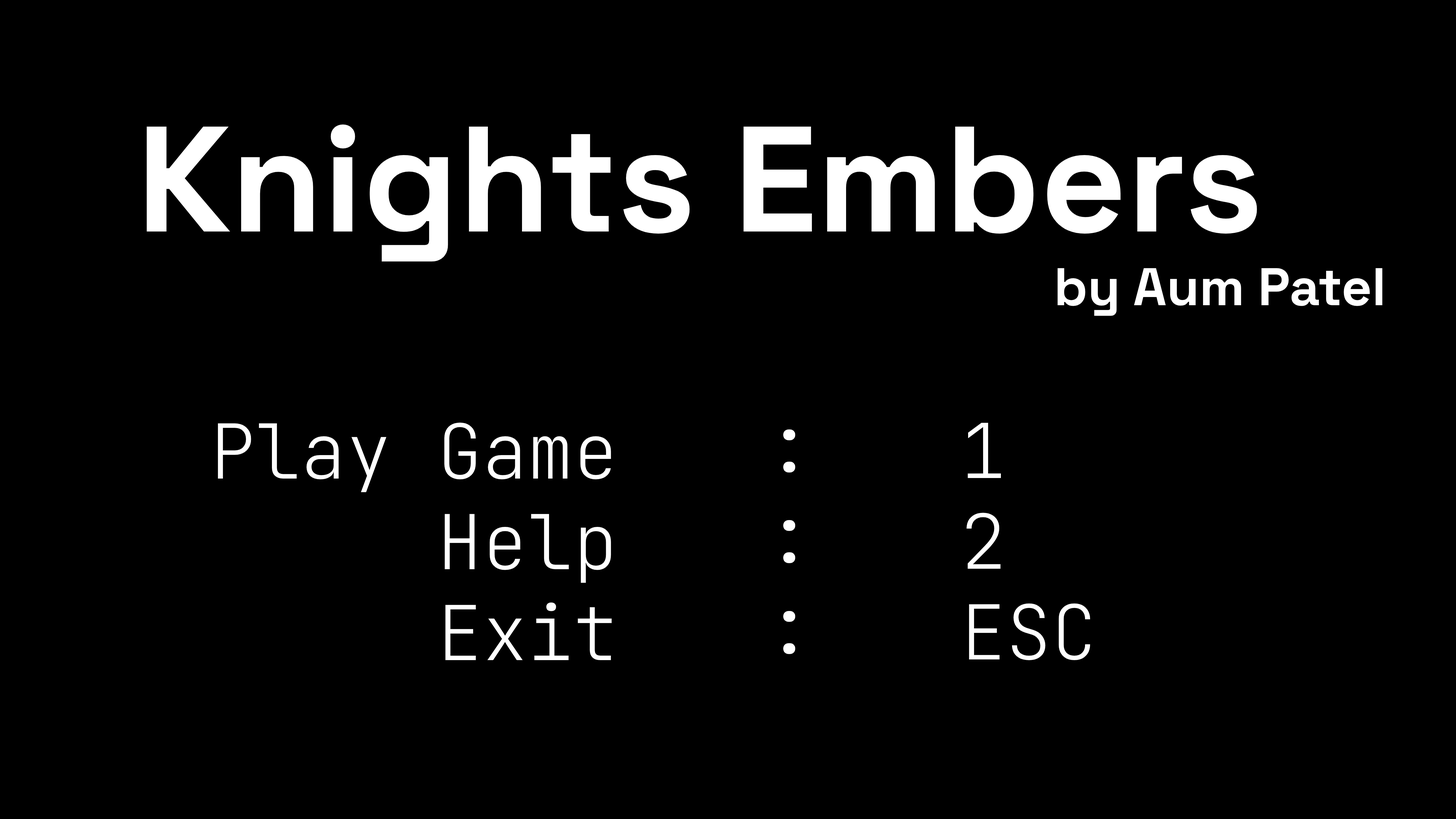
<style>
.page{position:relative;width:1456px;height:819px;background:#000000}
.page>*{position:absolute;margin:0}
.t1{font:149.9px "SpaceGrotesk-Bold";color:#ffffff}
.t2{font:53px "SpaceGrotesk-Bold";color:#ffffff}
.t3{font:75.6px "JetBrainsMono-Light";color:#ffffff}
</style>
<div class="page">
<p class="t1" style="left:147px;top:124px;width:1110px;height:138px">Knights Embers</p>
<p class="t2" style="left:1057px;top:268px;width:325px;height:48px">by Aum Patel</p>
<p class="t3" style="left:218px;top:423px;width:394px;height:237px;text-align:right">Play Game<br>Help<br>Exit</p>
<p class="t3" style="left:966px;top:423px;width:124px;height:237px">1<br>2<br>ESC</p>
<p class="t3" style="left:783px;top:429px;width:12px;height:225px;text-align:right">:<br>:<br>:</p>
</div>
